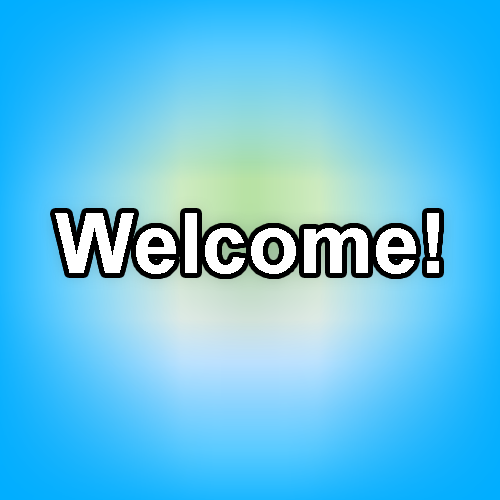
<style>
.page{position:relative;width:500px;height:500px}
.page>*{position:absolute;margin:0}
.t1{font:83.3px "Arial-BoldMT";color:#ffffff}
</style>
<div class="page">
<p class="t1" style="left:55px;top:213px;width:384px;height:61px">Welcome!</p>
</div>
